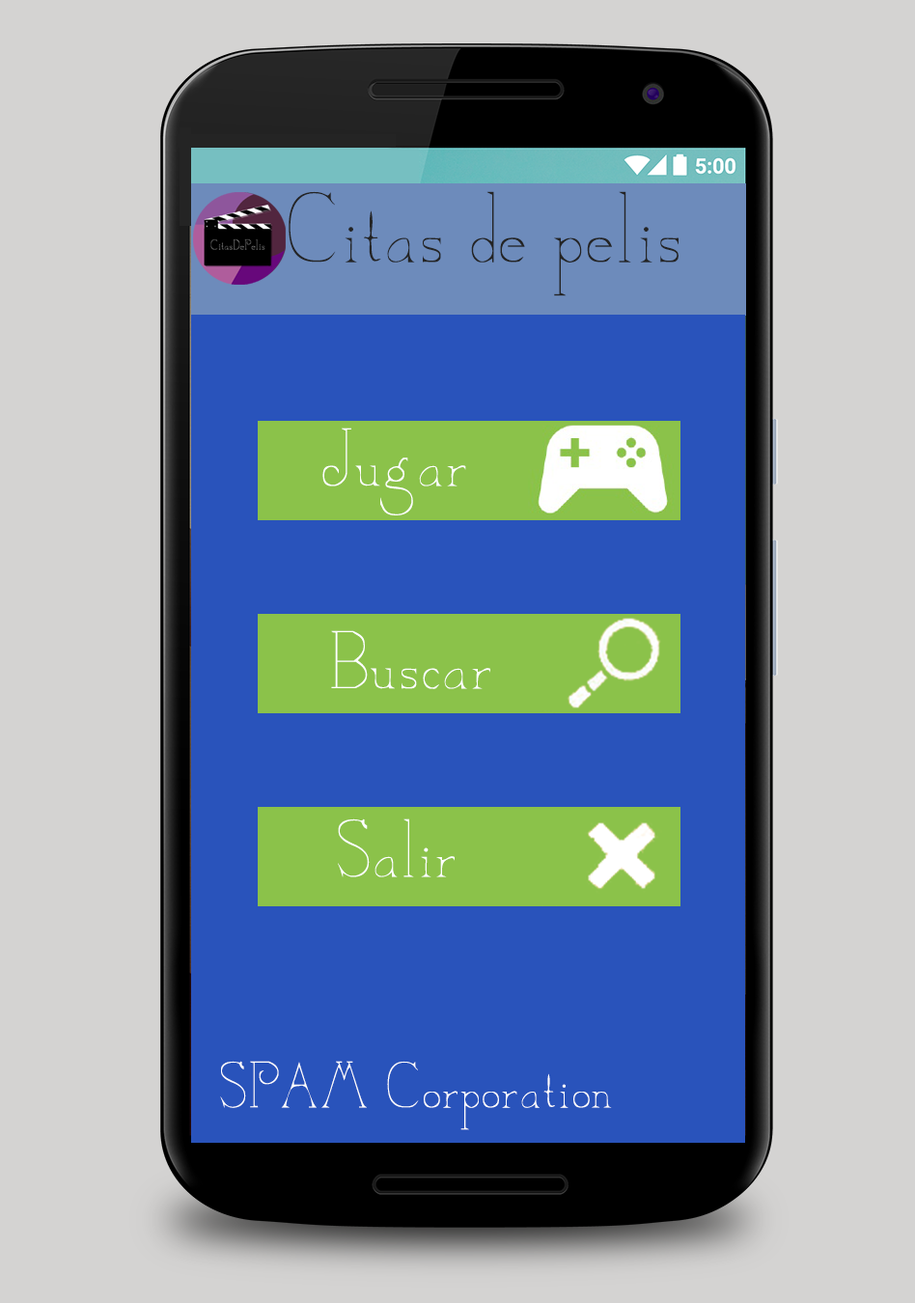
<style>
.page{position:relative;width:915px;height:1303px;background:#d4d3d2}
.page>*{position:absolute;margin:0}
.t1{font:106.2px "CamelotDeNada";color:#242424}
.t2{font:86.9px "CamelotDeNada";color:#ffffff}
.t3{font:69.5px "CamelotDeNada";color:#ffffff}
</style>
<div class="page">
<p class="t1" style="left:289px;top:191px;width:390px;height:105px">Citas de pelis</p>
<p class="t2" style="left:322px;top:428px;width:144px;height:87px">Jugar</p>
<p class="t2" style="left:331px;top:630px;width:159px;height:59px">Buscar</p>
<p class="t2" style="left:338px;top:819px;width:117px;height:58px">Salir</p>
<p class="t3" style="left:220px;top:1061px;width:392px;height:69px">SPAM Corporation</p>
</div>
